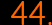
<style>
.page{position:relative;width:52px;height:25px;background:#000000}
.page>*{position:absolute;margin:0}
.t1{font:33.3px "Quicksand-Regular";color:#ff6600}
</style>
<div class="page">
<p class="t1" style="left:11px;top:1px;width:41px;height:24px">.44</p>
</div>
